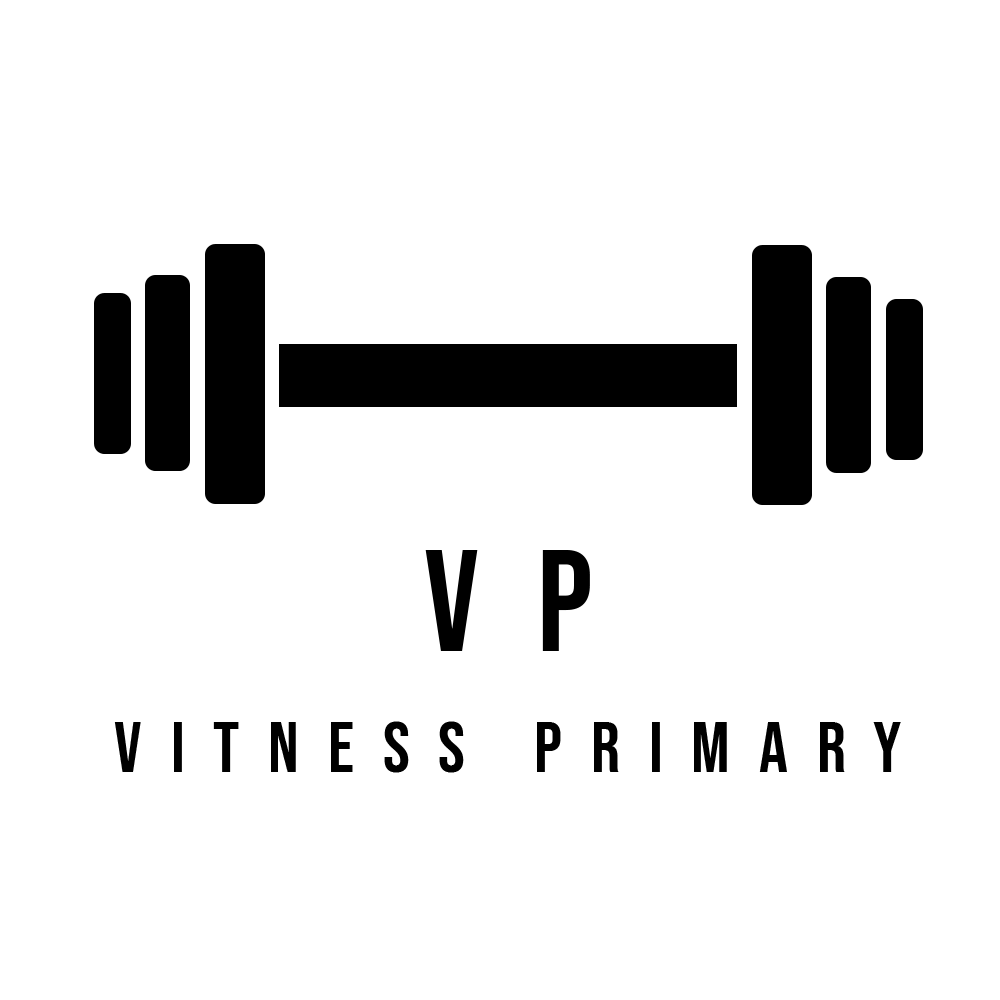
<style>
.page{position:relative;width:1000px;height:1000px;background:#ffffff}
.page>*{position:absolute;margin:0}
.t1{font:144px "BebasNeue-Regular";letter-spacing:0.4em;color:#000000}
.t2{font:72px "BebasNeue-Regular";letter-spacing:0.4em;color:#000000}
</style>
<div class="page">
<p class="t1" style="left:425px;top:550px;width:165px;height:101px">VP</p>
<p class="t2" style="left:114px;top:721px;width:787px;height:52px">VITNESS PRIMARY</p>
</div>
